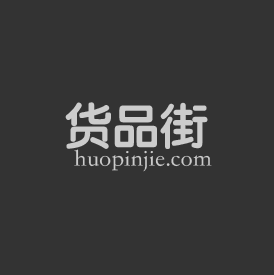
<style>
.page{position:relative;width:274px;height:275px;background:#333333}
.page>*{position:absolute;margin:0}
.t1{font:48px "STYuanti-SC-Bold";color:#cccccc}
.t2{font:24px "STSongti-SC-Regular";color:#cccccc}
</style>
<div class="page">
<p class="t1" style="left:65px;top:102px;width:143px;height:47px">货品街</p>
<p class="t2" style="left:74px;top:149px;width:138px;height:23px">huopinjie.com</p>
</div>
